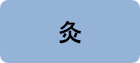
<style>
.page{position:relative;width:140px;height:63px;background:#95b3d7}
.page>*{position:absolute;margin:0}
.t1{font:24px "HGSGothicE";letter-spacing:0.065em;color:#000000}
</style>
<div class="page">
<p class="t1" style="left:59px;top:21px;width:22px;height:23px">灸</p>
</div>
